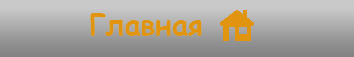
<style>
.page{position:relative;width:354px;height:57px}
.page>*{position:absolute;margin:0}
.t1{font:29.3px "ComicSansMS-Bold";color:#e09510}
</style>
<div class="page">
<p class="t1" style="left:90px;top:13px;width:112px;height:23px">Главная</p>
</div>
